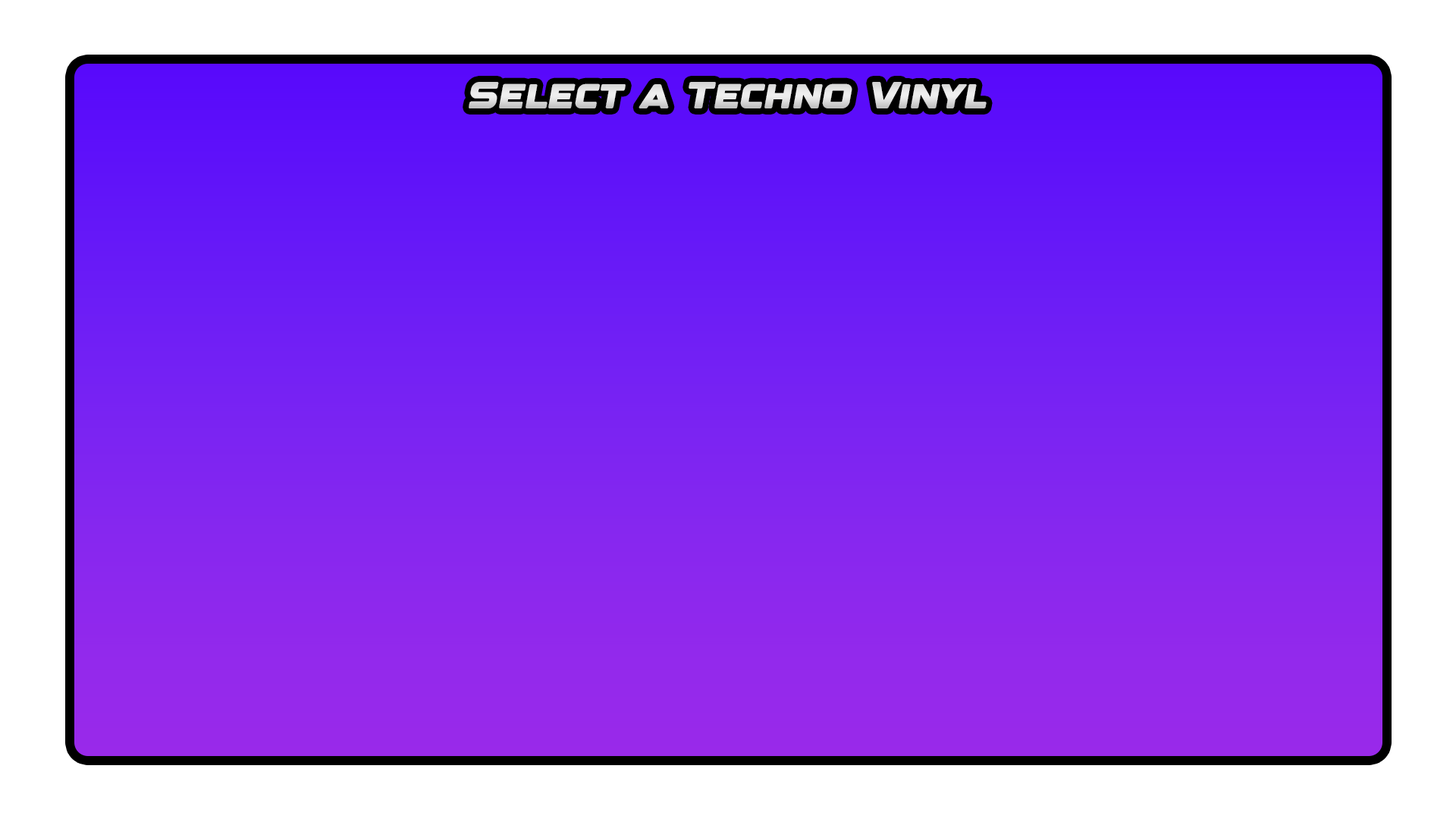
<style>
.page{position:relative;width:1456px;height:819px;background:#ffffff}
.page>*{position:absolute;margin:0}
.t1{font:37.9px "DesignerRegular";color:#dfdfdf}
</style>
<div class="page">
<p class="t1" style="left:469px;top:82px;width:518px;height:26px">Select a Techno Vinyl</p>
</div>
